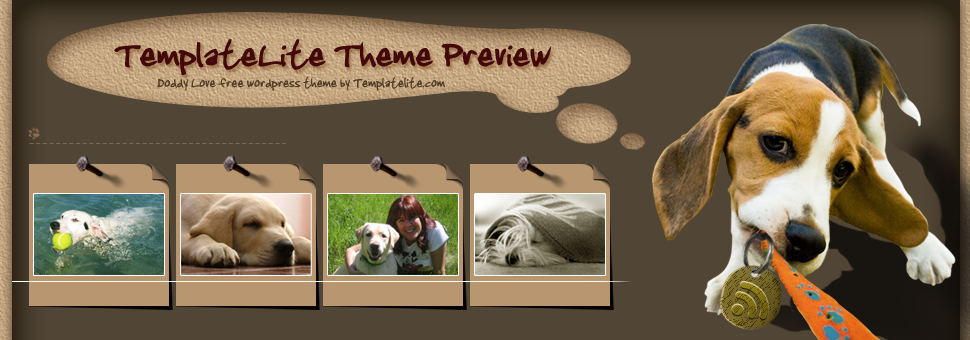
<style>
.page{position:relative;width:970px;height:340px;background:#514535}
.page>*{position:absolute;margin:0}
.t1{font:46.3px "Jenkinsv20Thik";letter-spacing:-0.01em;color:#43080a;scale:1.1 1}
.t2{font:18px "Jenkinsv20Thik";letter-spacing:-0.01em;color:#533e28}
</style>
<div class="page">
<p class="t1" style="left:114px;top:39px;width:438px;height:37px">TemplateLite Theme Preview</p>
<p class="t2" style="left:157px;top:76px;width:288px;height:15px">Doddy Love free wordpress theme by Templatelite.com</p>
</div>
